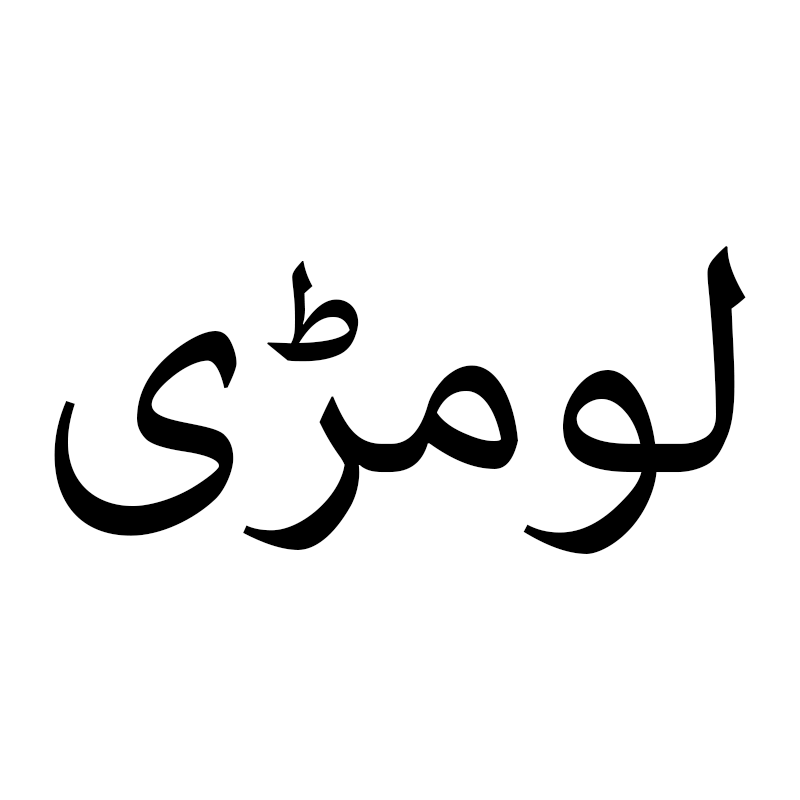
<style>
.page{position:relative;width:800px;height:800px;background:#ffffff}
.page>*{position:absolute;margin:0}
.t1{font:450px "AdobeArabic-Regular";color:#000000}
</style>
<div class="page">
<p class="t1" style="left:54px;top:245px;width:692px;height:309px">لومڑی</p>
</div>
